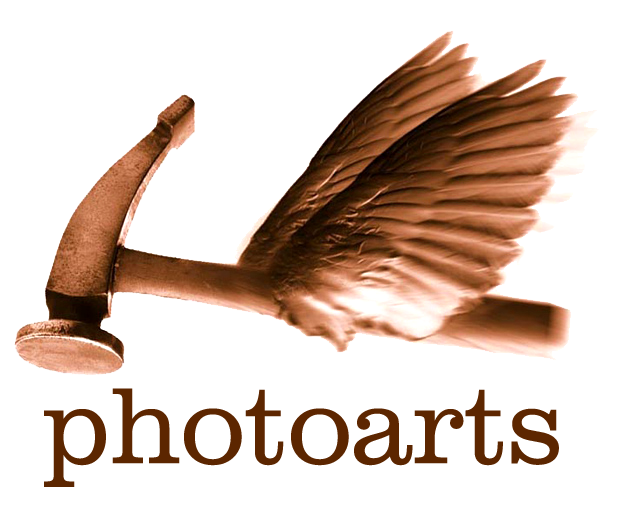
<style>
.page{position:relative;width:627px;height:515px;background:#ffffff}
.page>*{position:absolute;margin:0}
.t1{font:111px "ClarendonBT-Light";letter-spacing:-0.01em;color:#5d2600}
</style>
<div class="page">
<p class="t1" style="left:44px;top:388px;width:515px;height:99px">photoarts</p>
</div>
